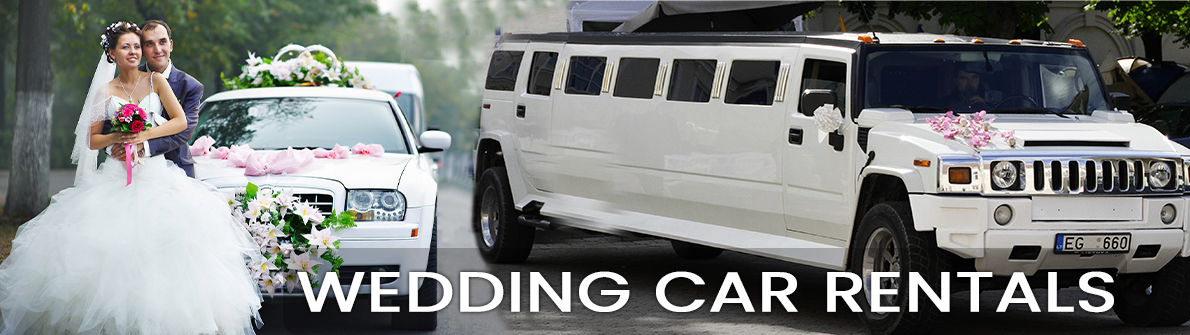
<style>
.page{position:relative;width:1190px;height:335px}
.page>*{position:absolute;margin:0}
.t1{font:55.8px "Poppins-Regular";color:#ffffff;text-transform:uppercase;font-weight:bold;scale:1.25 1}
</style>
<div class="page">
<p class="t1" style="left:297px;top:271px;width:817px;height:42px">Wedding Car Rentals</p>
</div>
